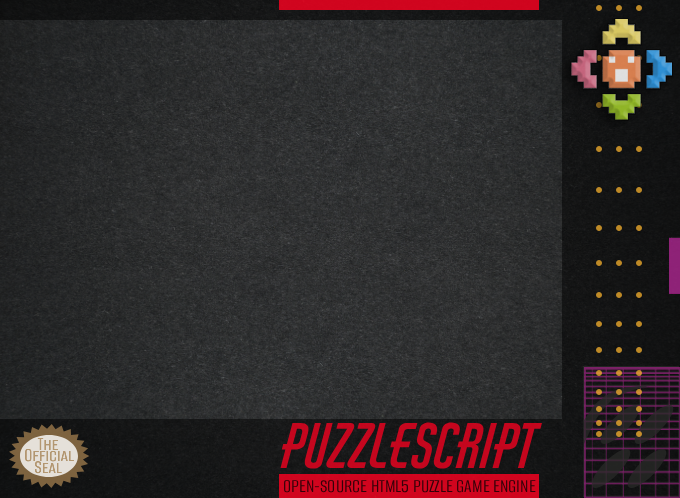
<style>
.page{position:relative;width:680px;height:498px}
.page>*{position:absolute;margin:0}
.t1{font:60px "AirAmerica-Regular";color:#c5061e}
.t2{font:20px "AlumniSansSC-Regular";color:#b39771}
.t3{font:20px "AlumniSansSC-Regular";color:#b29771}
.t4{font:20px "AlumniSansSC-Regular";color:#b39670}
.t5{font:20px "AlumniSansRoman-Regular";color:#340108}
</style>
<div class="page">
<p class="t1" style="left:280px;top:422px;width:262px;height:47px">Puzzlescript</p>
<p class="t2" style="left:37px;top:438px;width:21px;height:12px">The</p>
<p class="t3" style="left:25px;top:449px;width:49px;height:13px">Official</p>
<p class="t4" style="left:35px;top:461px;width:27px;height:13px">Seal</p>
<p class="t5" style="left:284px;top:480px;width:252px;height:13px">OPEN-SOURCE HTML5 PUZZLE GAME ENGINE</p>
</div>
